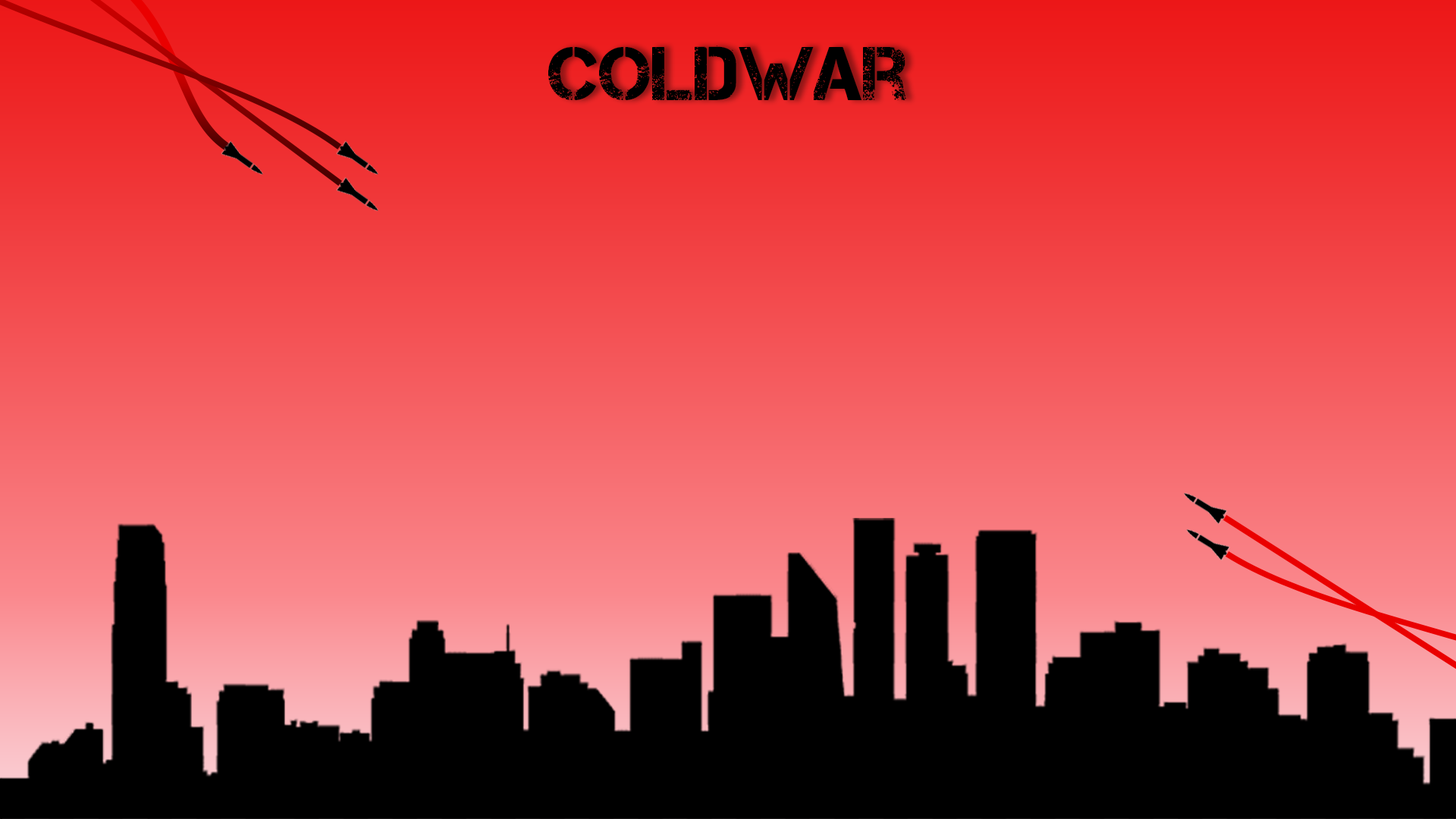
<style>
.page{position:relative;width:1456px;height:819px}
.page>*{position:absolute;margin:0}
.t1{font:75.8px "Captureit";color:#000000}
</style>
<div class="page">
<p class="t1" style="left:548px;top:45px;width:359px;height:55px">Coldwar</p>
</div>
